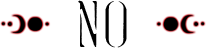
<style>
.page{position:relative;width:206px;height:48px;background:#ffffff}
.page>*{position:absolute;margin:0}
.t1{font:60px "Fluid-light";letter-spacing:-0.04em;color:#000000}
</style>
<div class="page">
<p class="t1" style="left:78px;top:0px;width:49px;height:48px">NO</p>
</div>
